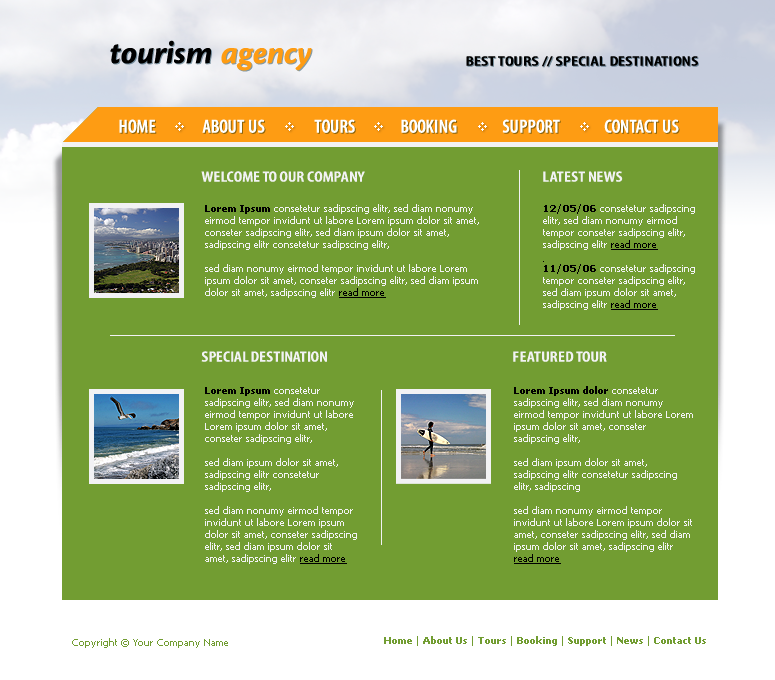
<style>
.page{position:relative;width:775px;height:680px;background:#729d32}
.page>*{position:absolute;margin:0}
.t1{font:33px "CronosPro-BoldCaptIt";color:#000000}
.t2{font:33px "CronosPro-BoldCaptIt";color:#fe9c13}
.t3{font:13.7px "MyriadPro-SemiboldCond";color:#000000;text-transform:uppercase;scale:1.39 1}
.t4{font:19px "MyriadPro-SemiboldCond";color:#ffffff;text-transform:uppercase}
.t5{font:14.9px "MyriadPro-SemiboldCond";color:#f2f2f4;text-transform:uppercase;scale:1.2 1}
.t6{font:10px "Tahoma";color:#f2f2f4}
.t7{font:10px "Tahoma-Bold";color:#000000}
.t8{font:10px "Tahoma";color:#000000;text-decoration:underline}
.t9{font:10px "Tahoma";color:#729d32}
.t10{font:10px "Tahoma-Bold";color:#729d32}
</style>
<div class="page">
<p class="t1" style="left:110px;top:40px;width:202px;height:31px">tourism <span class="t2">agency</span></p>
<p class="t3" style="left:466px;top:56px;width:232px;height:11px">best tours // special destinations</p>
<p class="t4" style="left:119px;top:119px;width:37px;height:14px">home</p>
<p class="t4" style="left:202px;top:119px;width:63px;height:14px">about us</p>
<p class="t4" style="left:314px;top:119px;width:41px;height:14px">tours</p>
<p class="t4" style="left:401px;top:119px;width:56px;height:14px">booking</p>
<p class="t4" style="left:502px;top:119px;width:58px;height:14px">support</p>
<p class="t4" style="left:604px;top:119px;width:75px;height:14px">contact us</p>
<p class="t5" style="left:201px;top:171px;width:164px;height:11px">welcome to our company</p>
<p class="t5" style="left:543px;top:171px;width:80px;height:11px">latest news</p>
<p class="t6" style="left:205px;top:204px;width:274px;height:94px"><span class="t7">Lorem Ipsum </span>consetetur sadipscing elitr, sed diam nonumy eirmod tempor invidunt ut labore Lorem ipsum dolor sit amet, conseter sadipscing elitr, sed diam ipsum dolor sit amet, sadipscing elitr consetetur sadipscing elitr, <br><br>sed diam nonumy eirmod tempor invidunt ut labore Lorem ipsum dolor sit amet, conseter sadipscing elitr, sed diam ipsum dolor sit amet, sadipscing elitr <span class="t8">read more</span></p>
<p class="t6" style="left:543px;top:204px;width:152px;height:106px"><span class="t7">12/05/06 </span>consetetur sadipscing elitr, sed diam nonumy eirmod tempor conseter sadipscing elitr, sadipscing elitr <span class="t8">read more<br><br></span><span class="t7">11/05/06 </span>consetetur sadipscing tempor conseter sadipscing elitr, sed diam ipsum dolor sit amet, sadipscing elitr <span class="t8">read more</span></p>
<p class="t5" style="left:201px;top:351px;width:126px;height:11px">special destination</p>
<p class="t5" style="left:513px;top:351px;width:94px;height:11px">featured tour</p>
<p class="t6" style="left:205px;top:387px;width:152px;height:177px"><span class="t7">Lorem Ipsum </span>consetetur sadipscing elitr, sed diam nonumy eirmod tempor invidunt ut labore Lorem ipsum dolor sit amet, conseter sadipscing elitr,<br><br>sed diam ipsum dolor sit amet, sadipscing elitr consetetur sadipscing elitr, <br><br>sed diam nonumy eirmod tempor invidunt ut labore Lorem ipsum dolor sit amet, conseter sadipscing elitr, sed diam ipsum dolor sit amet, sadipscing elitr <span class="t8">read more</span></p>
<p class="t6" style="left:514px;top:386px;width:179px;height:178px"><span class="t7">Lorem Ipsum dolor </span>consetetur sadipscing elitr, sed diam nonumy eirmod tempor invidunt ut labore Lorem ipsum dolor sit amet, conseter sadipscing elitr,<br><br>sed diam ipsum dolor sit amet, sadipscing elitr consetetur sadipscing elitr, sadipscing <br><br>sed diam nonumy eirmod tempor invidunt ut labore Lorem ipsum dolor sit amet, conseter sadipscing elitr, sed diam ipsum dolor sit amet, sadipscing elitr <span class="t8">read more</span></p>
<p class="t9" style="left:72px;top:638px;width:156px;height:10px">Copyright © Your Company Name</p>
<p class="t10" style="left:384px;top:636px;width:322px;height:10px"><span class="t9">  </span>Home <span class="t9">| </span>About Us <span class="t9">| </span>Tours <span class="t9">| </span>Booking <span class="t9">| </span>Support <span class="t9">| </span>News <span class="t9">| </span>Contact Us</p>
</div>
